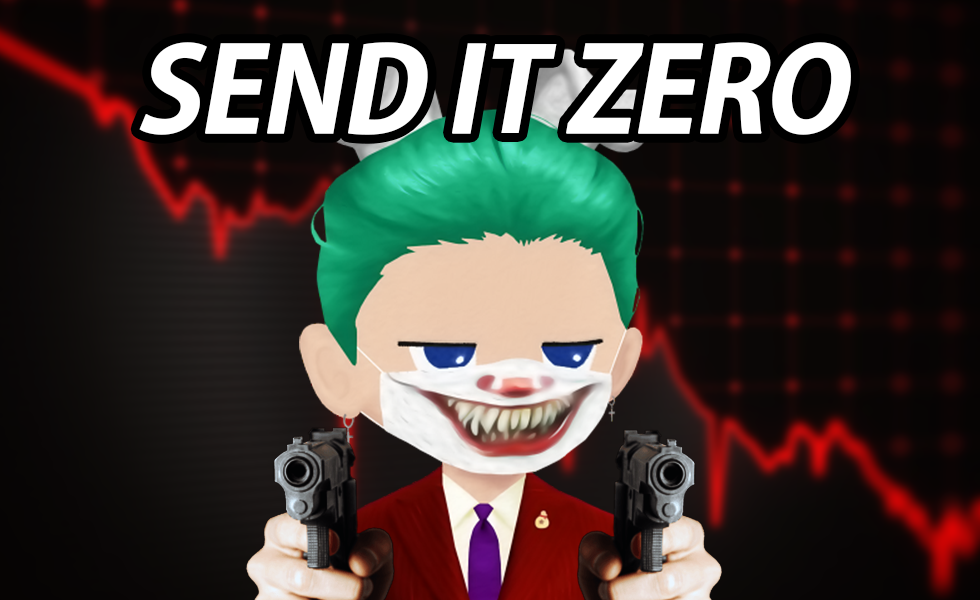
<style>
.page{position:relative;width:980px;height:600px}
.page>*{position:absolute;margin:0}
.t1{font:116px "AdobeGothicStd-Bold";letter-spacing:-0.04em;color:#ffffff;font-weight:bold;font-style:italic}
</style>
<div class="page">
<p class="t1" style="left:139px;top:42px;width:712px;height:93px">SEND IT ZERO</p>
</div>
